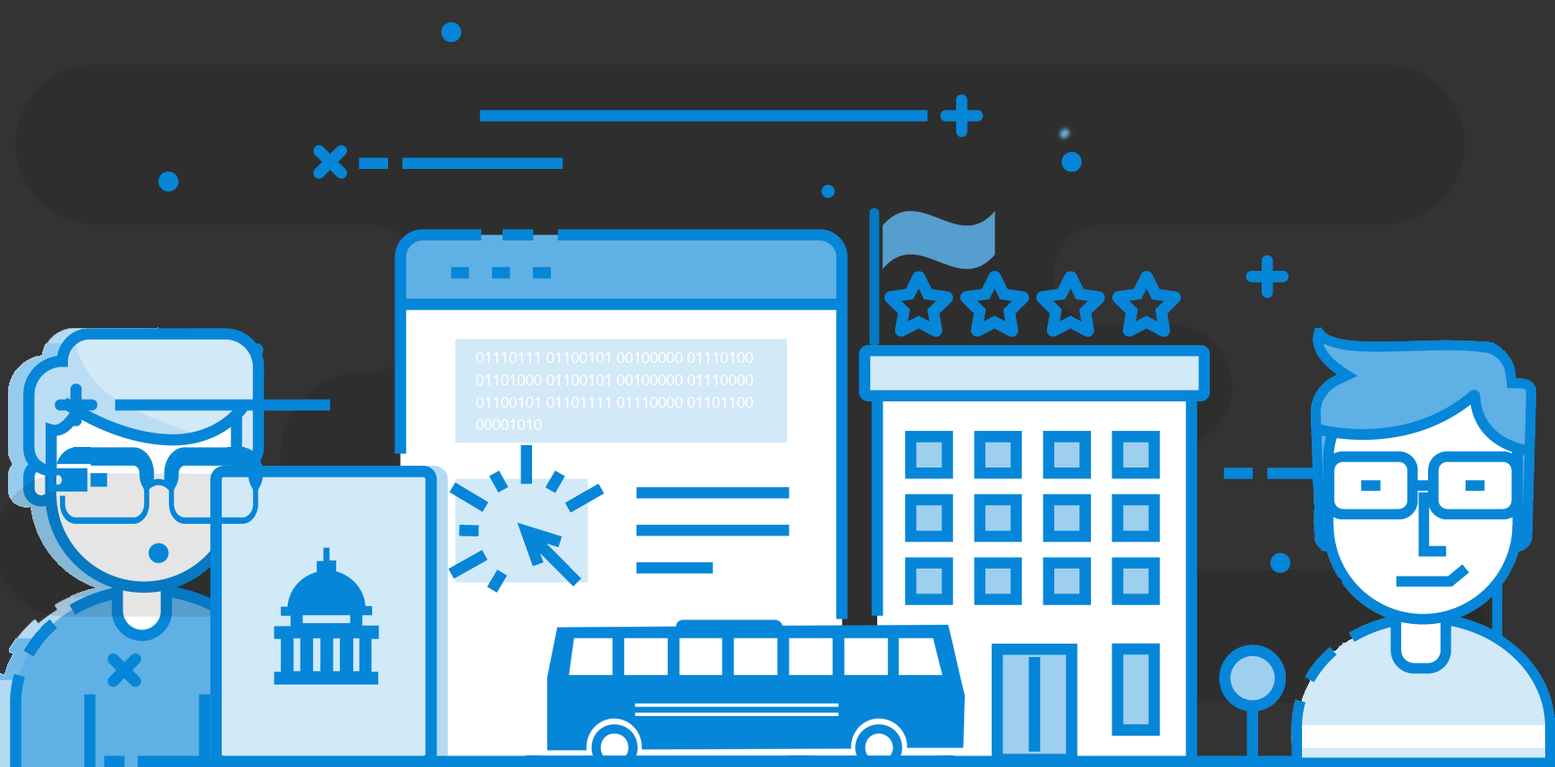
<style>
.page{position:relative;width:1555px;height:767px;background:#2e2e2e}
.page>*{position:absolute;margin:0}
.t1{font:14.9px/22.3px "Avenir-Roman";color:#ffffff}
</style>
<div class="page">
<p class="t1" style="left:476px;top:352px;width:278px;height:78px">01110111 01100101 00100000 01110100 01101000 01100101 00100000 01110000 01100101 01101111 01110000 01101100 00001010</p>
</div>
